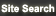
<style>
.page{position:relative;width:56px;height:16px}
.page>*{position:absolute;margin:0}
.t1{font:10.2px "ArialNarrow-Bold";color:#ffffff;scale:1.18 1}
</style>
<div class="page">
<p class="t1" style="left:1px;top:3px;width:54px;height:12px">Site Search</p>
</div>
